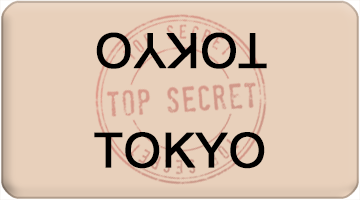
<style>
.page{position:relative;width:360px;height:200px;background:#e8d0bb}
.page>*{position:absolute;margin:0}
.t1{font:48px "ArialMT";color:#000000;font-weight:bold}
</style>
<div class="page">
<p class="t1" style="left:96px;top:32px;width:171px;height:37px;rotate:180deg">TOKYO</p>
<p class="t1" style="left:94px;top:132px;width:171px;height:37px">TOKYO</p>
</div>
